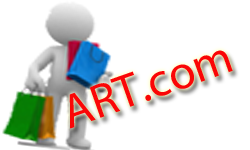
<style>
.page{position:relative;width:250px;height:150px;background:#ffffff}
.page>*{position:absolute;margin:0}
.t1{font:48px "MyriadPro-Regular";color:#fa0606}
</style>
<div class="page">
<p class="t1" style="left:69px;top:50px;width:164px;height:79px;rotate:-19deg">ART.com</p>
</div>
